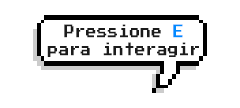
<style>
.page{position:relative;width:240px;height:108px;background:#ffffff}
.page>*{position:absolute;margin:0}
.t1{font:14.6px/17.5px "PressStart2P";letter-spacing:0.05em;color:#1b1b1b;scale:0.71 1}
.t2{font:14.6px/17.5px "PressStart2P";letter-spacing:0.05em;color:#008aff;scale:0.71 1}
</style>
<div class="page">
<p class="t1" style="left:47px;top:24px;width:152px;height:33px;text-align:center">Pressione <span class="t2">E<br></span>para interagir</p>
</div>
